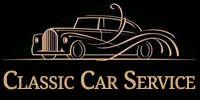
<style>
.page{position:relative;width:200px;height:100px;background:#000000}
.page>*{position:absolute;margin:0}
.t1{font:25px "DroidSerif";letter-spacing:-0.025em;color:#d2ae7e;font-variant:small-caps}
</style>
<div class="page">
<p class="t1" style="left:3px;top:70px;width:193px;height:20px">Classıc Car Servıce</p>
</div>
